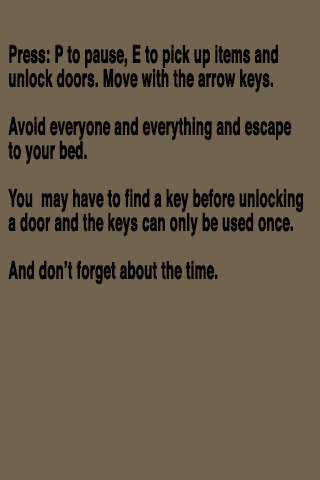
<style>
.page{position:relative;width:320px;height:480px;background:#72634e}
.page>*{position:absolute;margin:0}
.t1{font:24px/24px "Helvetica-Bold";color:#000000;font-weight:bold;scale:0.55 1}
</style>
<div class="page">
<p class="t1" style="left:8px;top:44px;width:295px;height:241px">Press: P to pause, E to pick up items and <br>unlock doors. Move with the arrow keys.<br><br>Avoid everyone and everything and escape<br>to your bed.<br><br>You  may have to find a key before unlocking<br>a door and the keys can only be used once.<br><br>And don’t forget about the time.</p>
</div>
